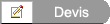
<style>
.page{position:relative;width:110px;height:24px;background:#999999}
.page>*{position:absolute;margin:0}
.t1{font:14px "ArialMT";color:#ffffff}
</style>
<div class="page">
<p class="t1" style="left:55px;top:6px;width:34px;height:12px">Devis</p>
</div>
